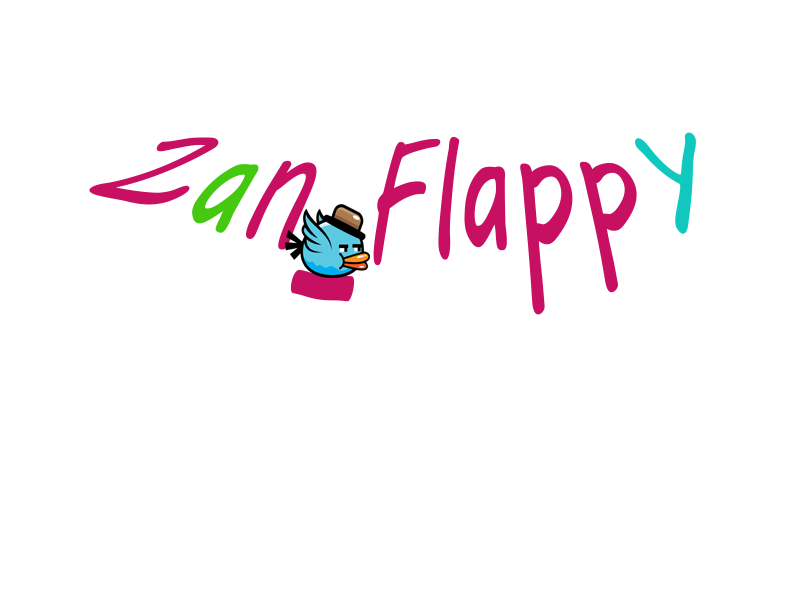
<style>
.page{position:relative;width:800px;height:600px;background:#ffffff}
.page>*{position:absolute;margin:0}
.t1{font:100px "MVBoli";color:#c81063}
.t2{font:100px "MVBoli";color:#44c810}
.t3{font:100px "MVBoli";color:#10c8bd}
</style>
<div class="page">
<p class="t1" style="left:89px;top:132px;width:607px;height:183px">Z<span class="t2">a</span>n_Flapp<span class="t3">Y</span></p>
</div>
